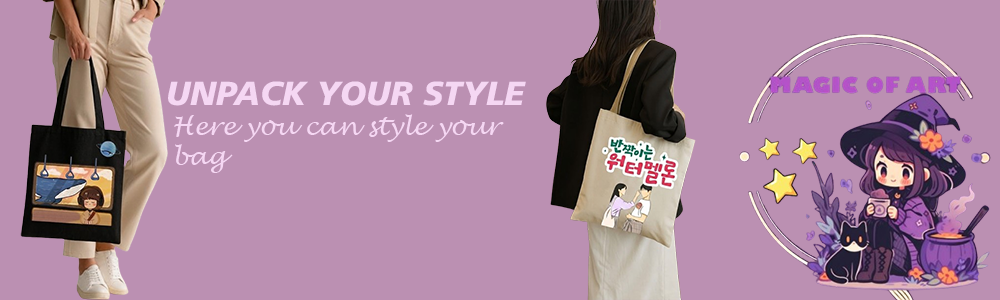
<style>
.page{position:relative;width:1000px;height:300px;background:#bb90b2}
.page>*{position:absolute;margin:0}
.t1{font:33.3px "ArticulateExtrabold-Italic";color:#f5d7f3}
.t2{font:25px "LucidaHandwriting-Italic";color:#f5d7f3}
.t3{font:33.3px "LucidaHandwriting-Italic";color:#f5d7f3}
</style>
<div class="page">
<p class="t1" style="left:168px;top:81px;width:358px;height:25px">UNPACK YOUR STYLE</p>
<p class="t2" style="left:174px;top:114px;width:330px;height:59px"><span class="t3"><br></span>Here you can style your <br>bag</p>
</div>
